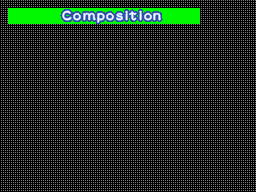
<style>
.page{position:relative;width:256px;height:192px;background:#000000}
.page>*{position:absolute;margin:0}
.t1{font:16.5px "DFLeiShoStd-W5";letter-spacing:0.075em;color:#ffffff}
</style>
<div class="page">
<p class="t1" style="left:62px;top:11px;width:99px;height:12px">Composition</p>
</div>
